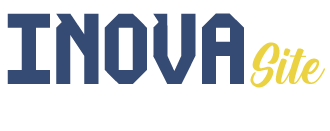
<style>
.page{position:relative;width:330px;height:131px;background:#ffffff}
.page>*{position:absolute;margin:0}
.t1{font:72px "MrTech-LySt";color:#354b74}
.t2{font:72px "CreamCake";color:#ebd242}
</style>
<div class="page">
<p class="t1" style="left:7px;top:13px;width:319px;height:75px">Inova<span class="t2">Site</span></p>
</div>
